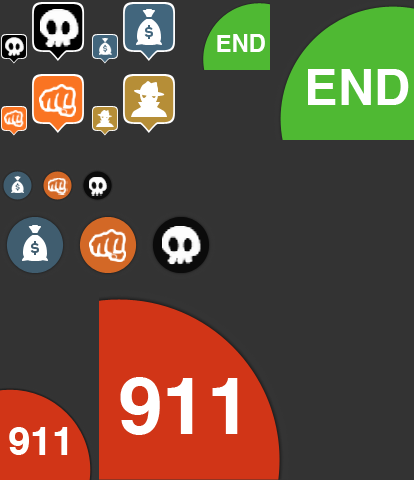
<style>
.page{position:relative;width:414px;height:480px;background:#333333}
.page>*{position:absolute;margin:0}
.t1{font:24px "Helvetica-Bold";color:#ffffff}
.t2{font:50px "Helvetica-Bold";color:#ffffff}
.t3{font:80px "Helvetica-Bold";color:#ffffff}
.t4{font:40px "Helvetica-Bold";color:#ffffff}
</style>
<div class="page">
<p class="t1" style="left:217px;top:34px;width:48px;height:18px">END</p>
<p class="t2" style="left:308px;top:69px;width:101px;height:36px">END</p>
<p class="t3" style="left:120px;top:377px;width:118px;height:58px">911</p>
<p class="t4" style="left:9px;top:427px;width:59px;height:28px">911</p>
</div>
